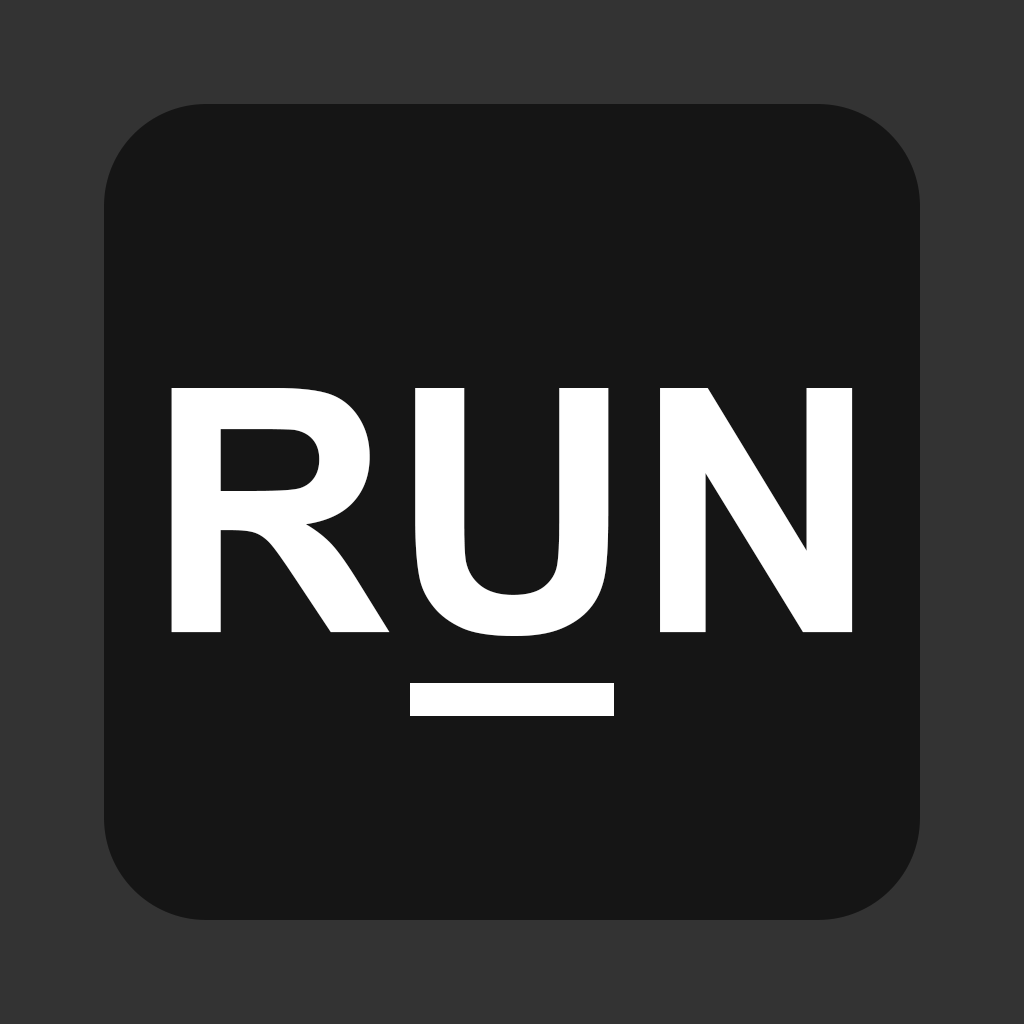
<style>
.page{position:relative;width:1024px;height:1024px;background:#151515}
.page>*{position:absolute;margin:0}
.t1{font:340.6px "Arial-BoldMT";color:#ffffff}
</style>
<div class="page">
<p class="t1" style="left:171px;top:388px;width:682px;height:248px">RUN</p>
</div>
